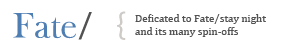
<style>
.page{position:relative;width:302px;height:51px;background:#ffffff}
.page>*{position:absolute;margin:0}
.t1{font:36px "OpenBaskerville0.0.53";color:#4e7eb2}
.t2{font:30px "Cambria";color:#525252}
.t3{font:11px "Cambria";color:#525252}
</style>
<div class="page">
<p class="t1" style="left:13px;top:13px;width:63px;height:26px">Fate</p>
<p class="t2" style="left:78px;top:12px;width:14px;height:28px">/</p>
<p class="t3" style="left:135px;top:14px;width:131px;height:23px">Deficated to Fate/stay night<br>and its many spin-offs</p>
</div>
